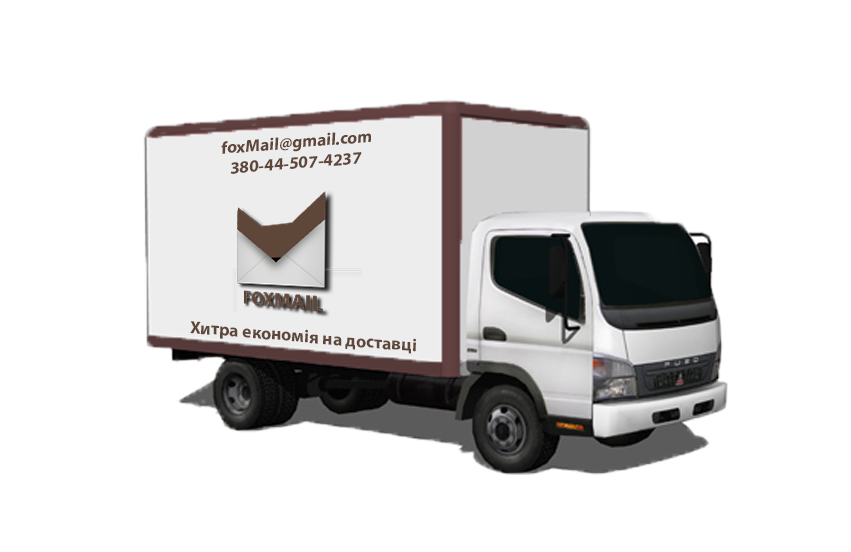
<style>
.page{position:relative;width:851px;height:552px;background:#ffffff}
.page>*{position:absolute;margin:0}
.t1{font:17.3px "MyriadPro-Bold";color:#5e4639}
.t2{font:17.7px "MyriadPro-Bold";color:#5e4639}
</style>
<div class="page">
<p class="t1" style="left:221px;top:132px;width:150px;height:42px;text-align:center;rotate:-5deg">foxMail@gmail.com<br>380-44-507-4237</p>
<p class="t2" style="left:190px;top:321px;width:226px;height:33px;rotate:5deg">Хитра економія на доставці</p>
</div>
